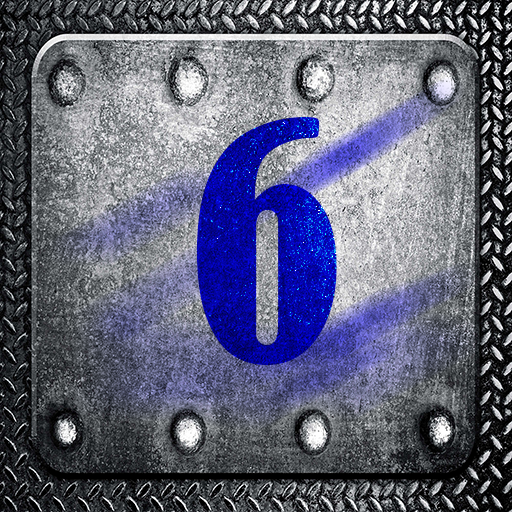
<style>
.page{position:relative;width:512px;height:512px}
.page>*{position:absolute;margin:0}
.t1{font:310.5px "BernardMT-Condensed"}
</style>
<div class="page">
<p class="t1" style="left:196px;top:117px;width:141px;height:248px">6</p>
</div>
